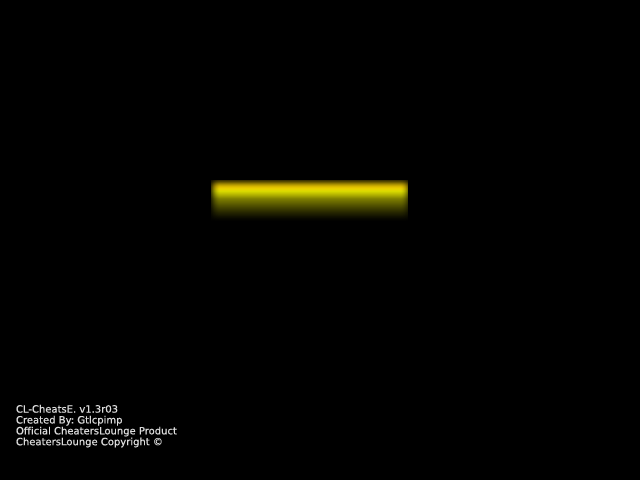
<style>
.page{position:relative;width:640px;height:480px;background:#000000}
.page>*{position:absolute;margin:0}
.t1{font:10px/10.9px "PrimaSansBT-Roman";color:#dcdcdc}
</style>
<div class="page">
<p class="t1" style="left:16px;top:404px;width:161px;height:44px">CL-CheatsE. v1.3r03<br>Created By: Gtlcpimp<br>Official CheatersLounge Product<br>CheatersLounge Copyright ©</p>
</div>
